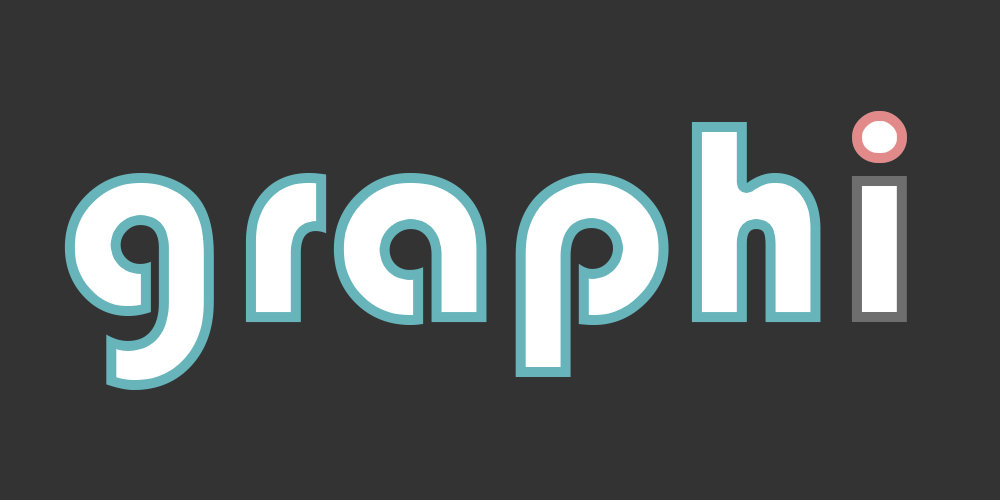
<style>
.page{position:relative;width:1000px;height:500px;background:#333333}
.page>*{position:absolute;margin:0}
.t1{font:300px "Bauhaus93"}
</style>
<div class="page">
<p class="t1" style="left:64px;top:122px;width:757px;height:268px">graph</p>
</div>
